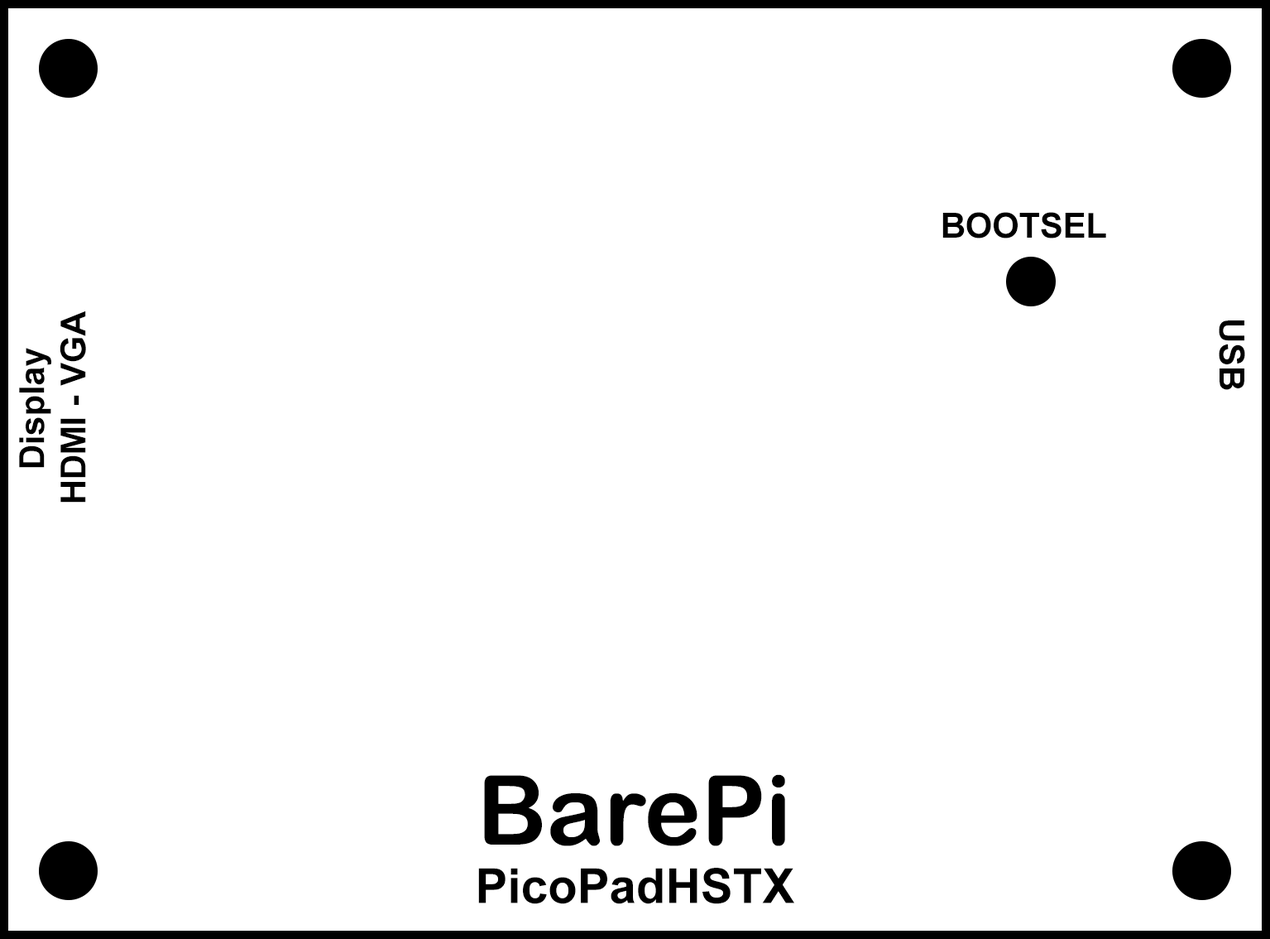
<style>
.page{position:relative;width:1270px;height:939px;background:#ffffff}
.page>*{position:absolute;margin:0}
.t1{font:34.5px "Arial-BoldMT";color:#000000}
.t2{font:96.6px "ArialRoundedMTBold";color:#000000}
.t3{font:48.3px "Arial-BoldMT";color:#000000}
</style>
<div class="page">
<p class="t1" style="left:943px;top:212px;width:164px;height:26px">BOOTSEL</p>
<p class="t1" style="left:19px;top:310px;width:67px;height:192px;text-align:center;rotate:-90deg">Display<br>HDMI - VGA</p>
<p class="t1" style="left:1219px;top:320px;width:27px;height:70px;rotate:90deg">USB</p>
<p class="t2" style="left:484px;top:774px;width:301px;height:72px">BarePi</p>
<p class="t3" style="left:478px;top:867px;width:317px;height:37px">PicoPadHSTX</p>
</div>
